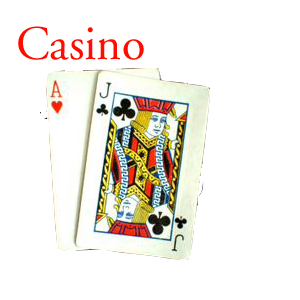
<style>
.page{position:relative;width:300px;height:300px;background:#ffffff}
.page>*{position:absolute;margin:0}
.t1{font:48px "AGaramond-Regular";color:#ff0c00}
</style>
<div class="page">
<p class="t1" style="left:18px;top:26px;width:126px;height:34px">Casino</p>
</div>
